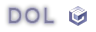
<style>
.page{position:relative;width:96px;height:32px;background:#ffffff}
.page>*{position:absolute;margin:0}
.t1{font:24px "ElyRounded-Heavy";letter-spacing:0.025em}
</style>
<div class="page">
<p class="t1" style="left:8px;top:7px;width:47px;height:17px">DOL</p>
</div>
